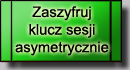
<style>
.page{position:relative;width:130px;height:70px}
.page>*{position:absolute;margin:0}
.t1{font:14.7px "ArialMT";color:#000000}
</style>
<div class="page">
<p class="t1" style="left:15px;top:6px;width:94px;height:50px;text-align:center">Zaszyfruj<br>klucz sesji<br>asymetrycznie</p>
</div>
